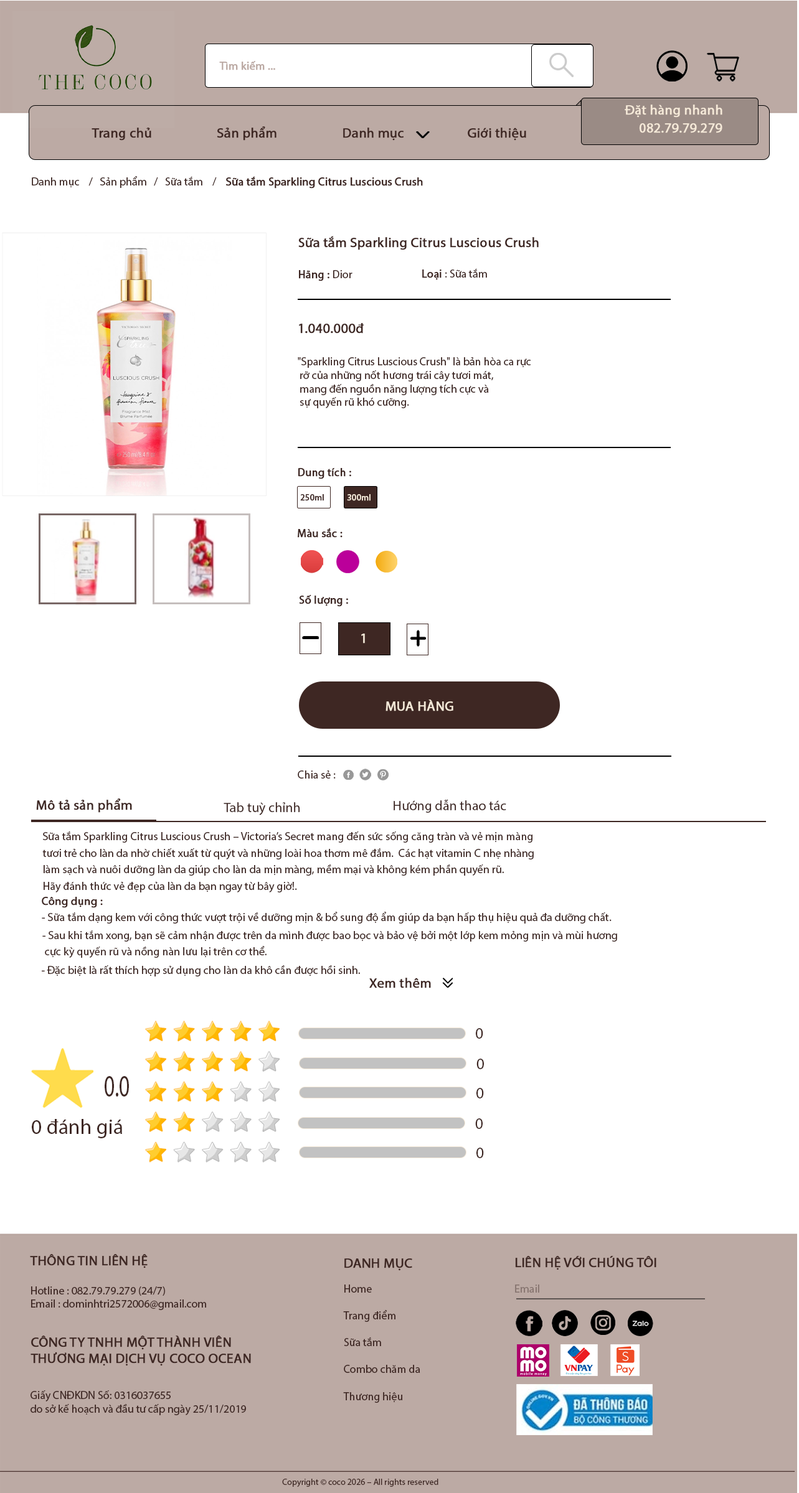
<style>
.page{position:relative;width:799px;height:1493px;background:#ffffff}
.page>*{position:absolute;margin:0}
.t1{font:11.2px "MyriadPro-Regular";color:#bcaaa4;font-weight:bold}
.t2{font:13.7px "MyriadPro-Regular";color:#f5e9d8;font-weight:bold}
.t3{font:13.7px "MyriadPro-Regular";color:#3e2723;font-weight:bold}
.t4{font:11.2px "MyriadPro-Regular";color:#3e2723}
.t5{font:11.2px "MyriadPro-Regular";color:#3e2723;font-weight:bold}
.t6{font:8.7px "MyriadPro-Regular";color:#3e2723;font-weight:bold}
.t7{font:8.7px "MyriadPro-Regular";color:#f5e9d8;font-weight:bold}
.t8{font:13.7px "MyriadPro-Regular";color:#3e2723}
.t9{font:11.2px/16.4px "MyriadPro-Regular";letter-spacing:0.005em;color:#3e2723}
.t10{font:11.2px/16.4px "MyriadPro-Regular";letter-spacing:0.005em;color:#3e2723;font-weight:bold}
.t11{font:11.2px "MyriadPro-Regular";letter-spacing:0.005em;color:#3e2723}
.t12{font:13.7px "MyriadPro-Regular";letter-spacing:0.005em;color:#3e2723;font-weight:bold}
.t13{font:16.4px "MyriadPro-Regular";letter-spacing:0.005em;color:#3e2723}
.t14{font:31.2px "MyriadPro-Regular";letter-spacing:0.005em;color:#3e2723;scale:0.67 1}
.t15{font:20.8px "MyriadPro-Regular";letter-spacing:0.005em;color:#3e2723}
.t16{font:11.2px "MyriadPro-Regular";color:#86746f}
.t17{font:8.7px "MyriadPro-Regular";color:#3e2723}
</style>
<div class="page">
<p class="t1" style="left:219px;top:61px;width:56px;height:9px">Tìm kiếm ...</p>
<p class="t2" style="left:624px;top:105px;width:98px;height:13px">Đặt hàng nhanh</p>
<p class="t2" style="left:639px;top:123px;width:83px;height:10px">082.79.79.279</p>
<p class="t3" style="left:91px;top:128px;width:60px;height:13px">Trang chủ</p>
<p class="t3" style="left:217px;top:126px;width:59px;height:15px">Sản phẩm</p>
<p class="t3" style="left:343px;top:128px;width:61px;height:13px">Danh mục</p>
<p class="t3" style="left:467px;top:128px;width:59px;height:13px">Giới thiệu</p>
<p class="t4" style="left:32px;top:176px;width:391px;height:13px">Danh mục    /   Sản phẩm   /   Sữa tắm    /    <span class="t5">Sữa tắm Sparkling Citrus Luscious Crush</span></p>
<p class="t3" style="left:298px;top:236px;width:240px;height:14px">Sữa tắm Sparkling Citrus Luscious Crush</p>
<p class="t4" style="left:422px;top:268px;width:65px;height:12px"><span class="t5">Loại </span>: Sữa tắm</p>
<p class="t5" style="left:299px;top:270px;width:53px;height:11px">Hãng : <span class="t4">Dior</span></p>
<p class="t3" style="left:299px;top:323px;width:65px;height:11px">1.040.000đ</p>
<p class="t4" style="left:298px;top:357px;width:233px;height:51px">"Sparkling Citrus Luscious Crush" là bản hòa ca rực<br> rỡ của những nốt hương trái cây tươi mát,<br> mang đến nguồn năng lượng tích cực và <br> sự quyến rũ khó cưỡng.</p>
<p class="t5" style="left:298px;top:468px;width:53px;height:11px">Dung tích :</p>
<p class="t6" style="left:300px;top:494px;width:24px;height:7px">250ml</p>
<p class="t7" style="left:347px;top:494px;width:23px;height:7px">300ml</p>
<p class="t5" style="left:298px;top:528px;width:44px;height:10px">Màu sắc :</p>
<p class="t5" style="left:299px;top:595px;width:49px;height:12px">Số lượng :</p>
<p class="t2" style="left:361px;top:634px;width:4px;height:10px">1</p>
<p class="t2" style="left:385px;top:700px;width:68px;height:11px">MUA HÀNG</p>
<p class="t4" style="left:298px;top:770px;width:37px;height:9px">Chia sẻ :</p>
<p class="t3" style="left:36px;top:799px;width:96px;height:14px">Mô tả sản phẩm</p>
<p class="t8" style="left:223px;top:802px;width:77px;height:13px">Tab tuỳ chỉnh</p>
<p class="t8" style="left:393px;top:799px;width:113px;height:14px">Hướng dẫn thao tác</p>
<p class="t9" style="left:42px;top:831px;width:491px;height:62px">Sữa tắm Sparkling Citrus Luscious Crush – Victoria’s Secret mang đến sức sống căng tràn và vẻ mịn màng<br>tươi trẻ cho làn da nhờ chiết xuất từ quýt và những loài hoa thơm mê đắm.  Các hạt vitamin C nhẹ nhàng<br>làm sạch và nuôi dưỡng làn da giúp cho làn da mịn màng, mềm mại và không kém phần quyến rũ.<br>Hãy đánh thức vẻ đẹp của làn da bạn ngay từ bây giờ!.</p>
<p class="t9" style="left:42px;top:897px;width:569px;height:27px"><span class="t10">Công dụng :</span><br>- Sữa tắm dạng kem với công thức vượt trội về dưỡng mịn &amp; bổ sung độ ẩm giúp da bạn hấp thụ hiệu quả đa dưỡng chất.</p>
<p class="t9" style="left:42px;top:930px;width:575px;height:28px">- Sau khi tắm xong, bạn sẽ cảm nhận được trên da mình được bao bọc và bảo vệ bởi một lớp kem mỏng mịn và mùi hương<br> cực kỳ quyến rũ và nồng nàn lưu lại trên cơ thể.</p>
<p class="t11" style="left:42px;top:965px;width:318px;height:12px">- Đặc biệt là rất thích hợp sử dụng cho làn da khô cần được hồi sinh.</p>
<p class="t12" style="left:369px;top:978px;width:62px;height:10px">Xem thêm</p>
<p class="t13" style="left:476px;top:1028px;width:7px;height:11px">0</p>
<p class="t13" style="left:476px;top:1059px;width:8px;height:10px">0</p>
<p class="t14" style="left:105px;top:1076px;width:24px;height:21px">0.0</p>
<p class="t13" style="left:476px;top:1088px;width:8px;height:11px">0</p>
<p class="t15" style="left:32px;top:1119px;width:90px;height:19px">0 đánh giá</p>
<p class="t13" style="left:475px;top:1119px;width:7px;height:10px">0</p>
<p class="t13" style="left:476px;top:1148px;width:8px;height:10px">0</p>
<p class="t4" style="left:30px;top:1254px;width:176px;height:56px"><span class="t3">THÔNG TIN LIÊN HỆ <br><br></span>Hotline : 082.79.79.279 (24/7)<br>Email : dominhtri2572006@gmail.com</p>
<p class="t3" style="left:344px;top:1259px;width:68px;height:12px">DANH MỤC</p>
<p class="t3" style="left:515px;top:1256px;width:141px;height:14px">LIÊN HỆ VỚI CHÚNG TÔI</p>
<p class="t4" style="left:343px;top:1285px;width:77px;height:118px">Home <br><br>Trang điểm <br><br>Sữa tắm <br><br>Combo chăm da<br><br>Thương hiệu</p>
<p class="t16" style="left:515px;top:1285px;width:24px;height:8px">Email</p>
<p class="t3" style="left:30px;top:1336px;width:221px;height:30px">CÔNG TY TNHH MỘT THÀNH VIÊN <br>THƯƠNG MẠI DỊCH VỤ COCO OCEAN</p>
<p class="t4" style="left:30px;top:1391px;width:216px;height:24px">Giấy CNĐKDN Số: 0316037655 <br>do sở kế hoạch và đầu tư cấp ngày 25/11/2019</p>
<p class="t17" style="left:282px;top:1479px;width:156px;height:8px">Copyright © coco 2026 – All rights reserved</p>
</div>
